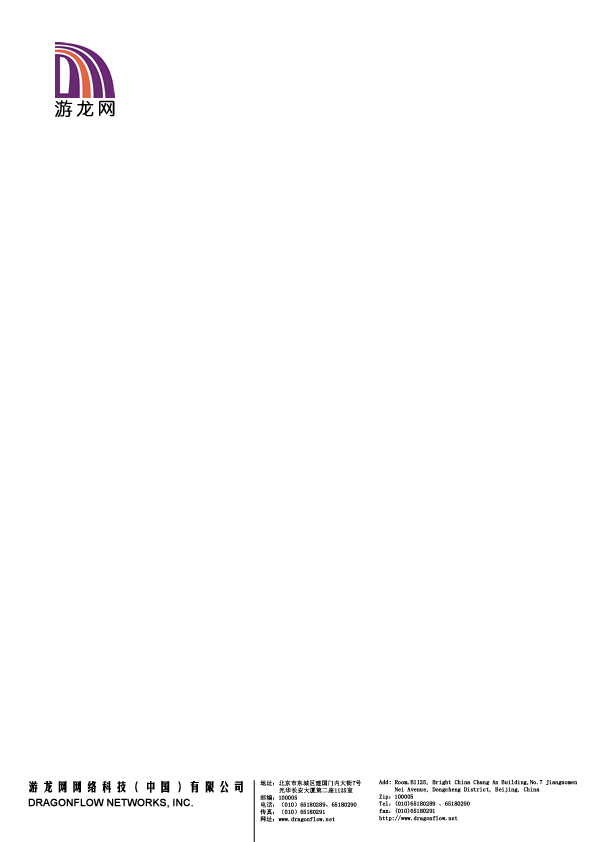
<style>
.page{position:relative;width:595px;height:842px;background:#ffffff}
.page>*{position:absolute;margin:0}
.t1{font:12px "FZMHJW--GB1-0";letter-spacing:0.2em;color:#000000;font-weight:bold}
.t2{font:6px "SimSun";color:#000000;font-weight:bold}
.t3{font:10px "ArialMT";color:#000000;font-weight:bold}
</style>
<div class="page">
<p class="t1" style="left:29px;top:781px;width:214px;height:12px">游龙网网络科技（中国）有限公司</p>
<p class="t2" style="left:260px;top:780px;width:101px;height:42px">地址：北京市东城区建国门内大街7号<br>      光华长安大厦第二座1125室<br>邮编：100005<br>电话：（010）65180289、65180290<br>传真：（010）65180291<br>网址：www.dragonflow.net</p>
<p class="t2" style="left:379px;top:779px;width:198px;height:42px">Add: Room.B1125, Bright China Chang An Building,No.7 Jianguomen <br>     Nei Avenue, Dongcheng District, Beijing, China<br>Zip：100005<br>Tel：(010)65180289 、65180290 <br>fax：(010)65180291<br>http://www.dragonflow.net</p>
<p class="t3" style="left:28px;top:798px;width:165px;height:10px">DRAGONFLOW NETWORKS, INC.</p>
</div>
